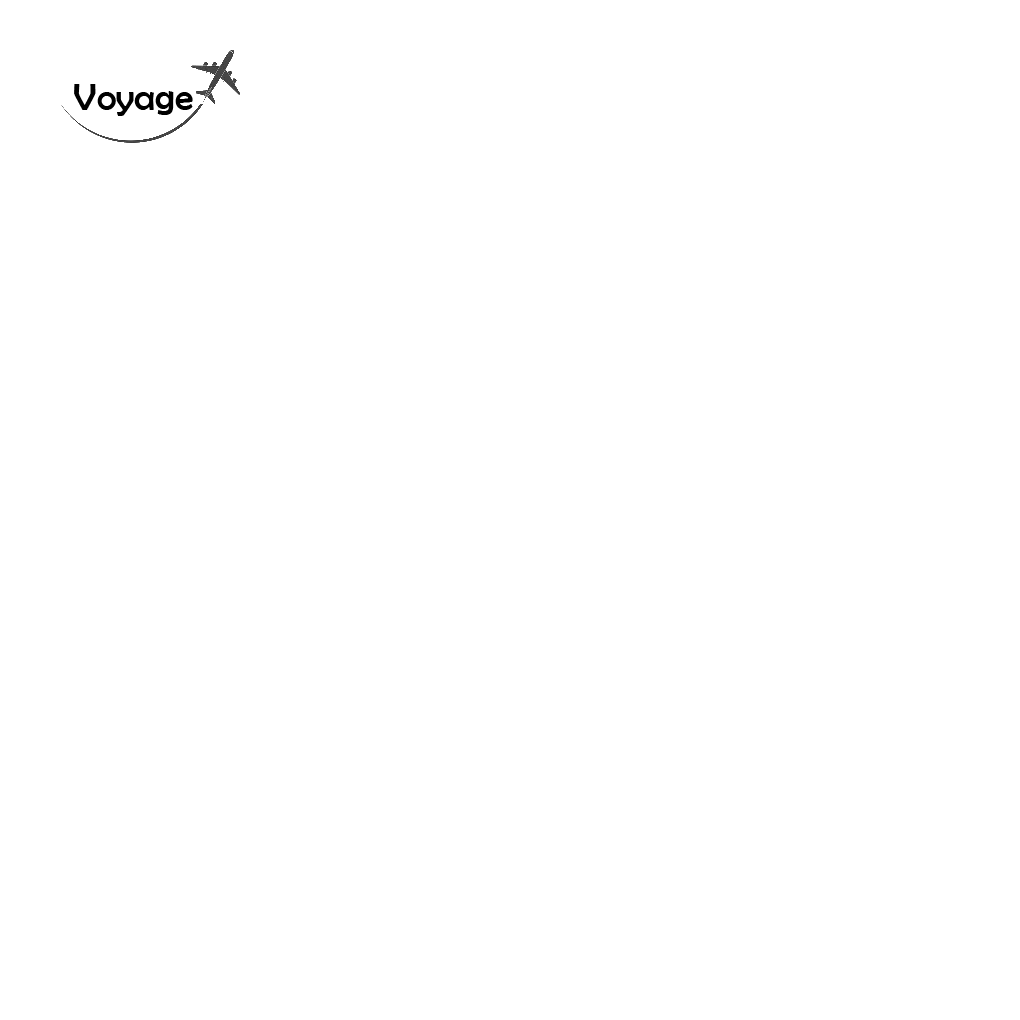
<style>
.page{position:relative;width:1020px;height:1020px;background:#ffffff}
.page>*{position:absolute;margin:0}
.t1{font:38px "BerlinSansFB-Reg";color:#000000}
</style>
<div class="page">
<p class="t1" style="left:74px;top:84px;width:119px;height:32px">Voyage</p>
</div>
